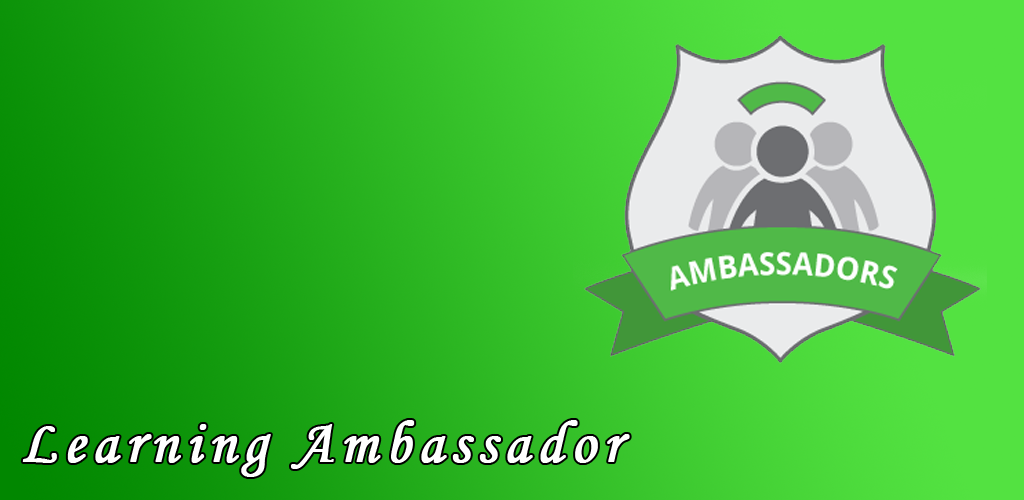
<style>
.page{position:relative;width:1024px;height:500px}
.page>*{position:absolute;margin:0}
.t1{font:60px "MonotypeCorsiva";letter-spacing:0.1em;color:#ffffff;font-weight:bold}
</style>
<div class="page">
<p class="t1" style="left:22px;top:420px;width:608px;height:57px">Learning Ambassador</p>
</div>
